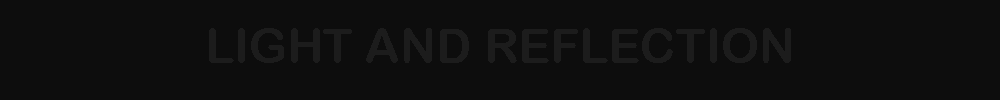
<style>
.page{position:relative;width:1000px;height:100px;background:#0d0d0d}
.page>*{position:absolute;margin:0}
.t1{font:48px "ArialRoundedMTBold";color:#1c1c1c}
</style>
<div class="page">
<p class="t1" style="left:209px;top:28px;width:582px;height:35px">LIGHT AND REFLECTION</p>
</div>
